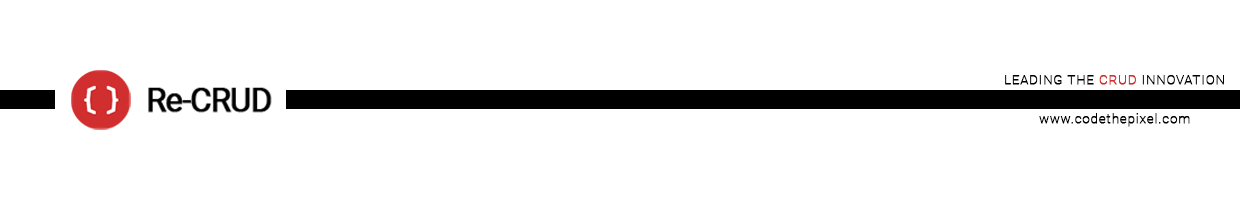
<style>
.page{position:relative;width:1240px;height:200px;background:#ffffff}
.page>*{position:absolute;margin:0}
.t1{font:12.5px "Roboto-Thin";letter-spacing:0.08em;color:#010101;font-weight:bold}
.t2{font:12.5px "Roboto-Thin";letter-spacing:0.08em;color:#d12f2f;font-weight:bold}
</style>
<div class="page">
<p class="t1" style="left:1005px;top:75px;width:219px;height:10px">LEADING THE <span class="t2">CRUD </span>INNOVATION</p>
<p class="t1" style="left:1039px;top:113px;width:151px;height:14px">www.codethepixel.com</p>
</div>
